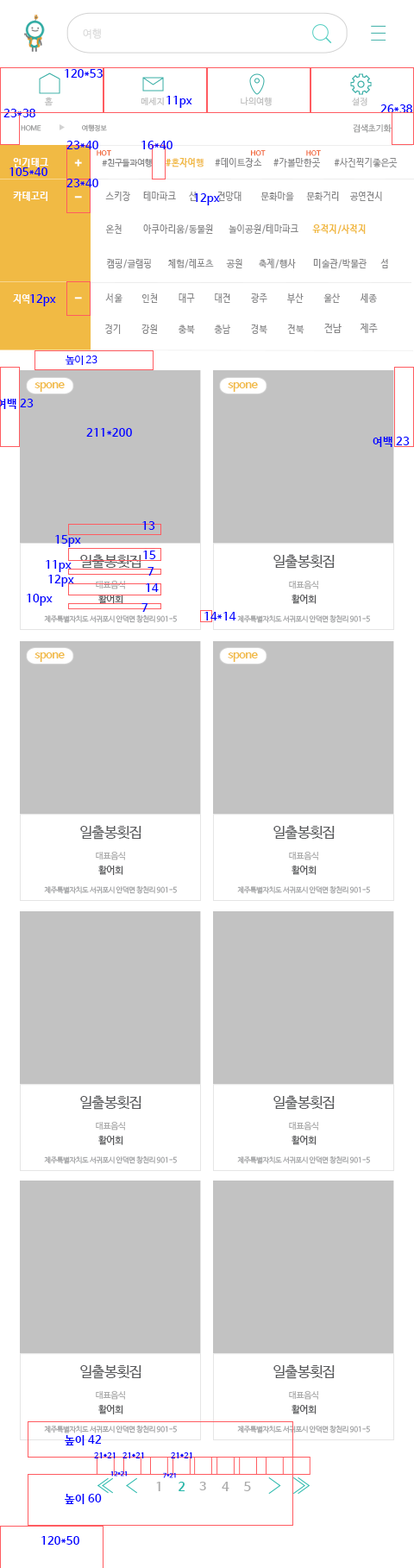
<style>
.page{position:relative;width:414px;height:1568px;background:#ffffff}
.page>*{position:absolute;margin:0}
.t1{font:10.4px "NanumBarunGothic";letter-spacing:0.025em;color:#dcdcdc}
.t2{font:11.2px "NanumBarunGothicBold";letter-spacing:0.025em;color:#0000ff}
.t3{font:8.6px "NanumBarunGothic";letter-spacing:0.025em;color:#bfbfbf}
.t4{font:6.9px "NanumBarunGothic";color:#999a9a}
.t5{font:8.6px "NanumBarunGothic";color:#999a9a}
.t6{font:9.9px "NanumBarunGothicBold";letter-spacing:0.025em;color:#ffffff}
.t7{font:6.8px "NanumBarunGothic";letter-spacing:0.025em}
.t8{font:8.4px "NanumBarunGothic";letter-spacing:0.025em;color:#868687}
.t9{font:9.1px "NanumBarunGothicBold";letter-spacing:0.025em;color:#f1ba44}
.t10{font:9.1px "NanumBarunGothic";letter-spacing:0.025em;color:#868687}
.t11{font:9.5px "NanumBarunGothicBold";letter-spacing:0.025em;color:#ffffff}
.t12{font:9.5px "NanumBarunGothic";letter-spacing:0.025em;color:#868687}
.t13{font:10.4px "NanumBarunGothic";letter-spacing:-0.025em;color:#0000ff}
.t14{font:11.6px "NanumBarunGothicBold";letter-spacing:-0.05em;color:#f1ba44}
.t15{font:14.3px "NanumBarunGothic";letter-spacing:-0.025em;color:#58595b}
.t16{font:8.7px "NanumBarunGothic";letter-spacing:-0.025em;color:#aaaaaa}
.t17{font:9.4px "NanumBarunGothic";letter-spacing:-0.025em;color:#555658}
.t18{font:7.2px "NanumBarunGothic";letter-spacing:-0.025em;color:#a3a4a6}
.t19{font:7.8px "NanumBarunGothicBold";letter-spacing:0.025em;color:#0000ff}
.t20{font:6px "NanumBarunGothicBold";letter-spacing:0.025em;color:#0000ff}
.t21{font:12.1px "NanumBarunGothicBold";letter-spacing:-0.05em;color:#ababab}
.t22{font:6px "NanumBarunGothicBold";letter-spacing:0.025em}
.t23{font:12.1px "NanumBarunGothicBold";letter-spacing:-0.05em;color:#25b7aa}
</style>
<div class="page">
<p class="t1" style="left:83px;top:28px;width:18px;height:11px">여행</p>
<p class="t2" style="left:65px;top:69px;width:38px;height:9px">120*53</p>
<p class="t3" style="left:44px;top:97px;width:10px;height:9px">홈</p>
<p class="t3" style="left:141px;top:98px;width:23px;height:7px">메세지</p>
<p class="t2" style="left:167px;top:96px;width:25px;height:12px">11px</p>
<p class="t3" style="left:241px;top:97px;width:31px;height:9px">나의여행</p>
<p class="t3" style="left:352px;top:98px;width:16px;height:8px">설정</p>
<p class="t2" style="left:3px;top:109px;width:32px;height:8px">23*38</p>
<p class="t2" style="left:381px;top:104px;width:31px;height:9px">26*38</p>
<p class="t4" style="left:21px;top:125px;width:20px;height:6px">HOME</p>
<p class="t4" style="left:82px;top:124px;width:25px;height:8px">여행정보</p>
<p class="t5" style="left:353px;top:123px;width:39px;height:10px">검색초기화</p>
<p class="t2" style="left:66px;top:141px;width:32px;height:8px">23*40</p>
<p class="t2" style="left:142px;top:141px;width:31px;height:8px">16*40</p>
<p class="t6" style="left:13px;top:158px;width:35px;height:9px">인기태그</p>
<p class="t6" style="left:13px;top:158px;width:35px;height:9px">인기태그</p>
<p class="t7" style="left:97px;top:150px;width:14px;height:6px">HOT</p>
<p class="t8" style="left:102px;top:159px;width:50px;height:8px">#친구들과여행</p>
<p class="t9" style="left:166px;top:158px;width:38px;height:9px">#혼자여행</p>
<p class="t10" style="left:215px;top:158px;width:47px;height:9px">#데이트장소</p>
<p class="t7" style="left:251px;top:150px;width:15px;height:6px">HOT</p>
<p class="t10" style="left:274px;top:158px;width:46px;height:9px">#가볼만한곳</p>
<p class="t7" style="left:306px;top:150px;width:15px;height:6px">HOT</p>
<p class="t10" style="left:334px;top:158px;width:64px;height:9px">#사진찍기좋은곳</p>
<p class="t2" style="left:9px;top:167px;width:38px;height:9px">105*40</p>
<p class="t2" style="left:66px;top:179px;width:32px;height:8px">23*40</p>
<p class="t6" style="left:13px;top:192px;width:34px;height:9px">카테고리</p>
<p class="t10" style="left:105px;top:192px;width:25px;height:9px">스키장</p>
<p class="t10" style="left:143px;top:191px;width:33px;height:10px">테마파크</p>
<p class="t10" style="left:189px;top:192px;width:9px;height:9px">산</p>
<p class="t2" style="left:194px;top:193px;width:26px;height:12px">12px</p>
<p class="t10" style="left:217px;top:192px;width:25px;height:9px">전망대</p>
<p class="t10" style="left:261px;top:192px;width:33px;height:9px">문화마을</p>
<p class="t10" style="left:306px;top:192px;width:33px;height:9px">문화거리</p>
<p class="t10" style="left:349px;top:192px;width:33px;height:9px">공연전시</p>
<p class="t10" style="left:105px;top:224px;width:17px;height:10px">온천</p>
<p class="t10" style="left:143px;top:224px;width:70px;height:10px">아쿠아리움/동물원</p>
<p class="t10" style="left:229px;top:224px;width:70px;height:10px">놀이공원/테마파크</p>
<p class="t9" style="left:312px;top:224px;width:54px;height:10px">유적지/사적지</p>
<p class="t10" style="left:106px;top:259px;width:45px;height:9px">캠핑/글램핑</p>
<p class="t10" style="left:167px;top:259px;width:47px;height:9px">체험/레포츠</p>
<p class="t10" style="left:226px;top:259px;width:16px;height:9px">공원</p>
<p class="t10" style="left:259px;top:258px;width:37px;height:10px">축제/행사</p>
<p class="t10" style="left:313px;top:259px;width:54px;height:9px">미술관/박물관</p>
<p class="t10" style="left:381px;top:259px;width:7px;height:9px">섬</p>
<p class="t10" style="left:105px;top:293px;width:18px;height:10px">서울</p>
<p class="t10" style="left:142px;top:293px;width:16px;height:10px">인천</p>
<p class="t10" style="left:179px;top:293px;width:16px;height:10px">대구</p>
<p class="t10" style="left:215px;top:293px;width:15px;height:10px">대전</p>
<p class="t10" style="left:251px;top:293px;width:17px;height:10px">광주</p>
<p class="t10" style="left:287px;top:293px;width:17px;height:11px">부산</p>
<p class="t10" style="left:324px;top:293px;width:16px;height:10px">울산</p>
<p class="t10" style="left:360px;top:293px;width:17px;height:10px">세종</p>
<p class="t11" style="left:13px;top:294px;width:16px;height:10px">지역</p>
<p class="t2" style="left:30px;top:294px;width:26px;height:12px">12px</p>
<p class="t10" style="left:105px;top:324px;width:16px;height:10px">경기</p>
<p class="t10" style="left:142px;top:324px;width:15px;height:10px">강원</p>
<p class="t10" style="left:178px;top:324px;width:17px;height:10px">충북</p>
<p class="t10" style="left:214px;top:324px;width:16px;height:10px">충남</p>
<p class="t10" style="left:251px;top:324px;width:17px;height:10px">경북</p>
<p class="t10" style="left:287px;top:324px;width:18px;height:10px">전북</p>
<p class="t12" style="left:324px;top:324px;width:18px;height:9px">전남</p>
<p class="t12" style="left:360px;top:323px;width:18px;height:10px">제주</p>
<p class="t13" style="left:65px;top:355px;width:33px;height:10px">높이 23</p>
<p class="t14" style="left:35px;top:382px;width:30px;height:10px">spone</p>
<p class="t14" style="left:228px;top:382px;width:30px;height:10px">spone</p>
<p class="t2" style="left:86px;top:428px;width:46px;height:9px">211*200</p>
<p class="t2" style="left:373px;top:437px;width:37px;height:10px">여백 23</p>
<p class="t2" style="left:142px;top:521px;width:13px;height:9px">13</p>
<p class="t2" style="left:55px;top:535px;width:26px;height:12px">15px</p>
<p class="t15" style="left:80px;top:554px;width:62px;height:15px">일출봉횟집</p>
<p class="t2" style="left:143px;top:551px;width:13px;height:8px">15</p>
<p class="t15" style="left:274px;top:554px;width:61px;height:15px">일출봉횟집</p>
<p class="t2" style="left:46px;top:560px;width:26px;height:12px">11px</p>
<p class="t2" style="left:148px;top:567px;width:6px;height:9px">7</p>
<p class="t2" style="left:48px;top:575px;width:26px;height:12px">12px</p>
<p class="t16" style="left:96px;top:580px;width:29px;height:9px">대표음식</p>
<p class="t16" style="left:289px;top:580px;width:29px;height:9px">대표음식</p>
<p class="t2" style="left:27px;top:594px;width:26px;height:12px">10px</p>
<p class="t2" style="left:146px;top:583px;width:13px;height:9px">14</p>
<p class="t17" style="left:98px;top:595px;width:25px;height:9px">활어회</p>
<p class="t2" style="left:142px;top:603px;width:6px;height:9px">7</p>
<p class="t17" style="left:292px;top:595px;width:25px;height:9px">활어회</p>
<p class="t18" style="left:44px;top:615px;width:133px;height:8px">제주특별자치도 서귀포시 안덕면 창천리 901-5</p>
<p class="t2" style="left:205px;top:612px;width:31px;height:8px">14*14</p>
<p class="t18" style="left:237px;top:615px;width:133px;height:8px">제주특별자치도 서귀포시 안덕면 창천리 901-5</p>
<p class="t14" style="left:35px;top:652px;width:30px;height:10px">spone</p>
<p class="t14" style="left:228px;top:652px;width:30px;height:10px">spone</p>
<p class="t15" style="left:80px;top:825px;width:62px;height:15px">일출봉횟집</p>
<p class="t15" style="left:274px;top:825px;width:61px;height:15px">일출봉횟집</p>
<p class="t16" style="left:96px;top:851px;width:29px;height:9px">대표음식</p>
<p class="t16" style="left:289px;top:851px;width:29px;height:9px">대표음식</p>
<p class="t17" style="left:98px;top:866px;width:25px;height:9px">활어회</p>
<p class="t17" style="left:292px;top:866px;width:25px;height:9px">활어회</p>
<p class="t18" style="left:44px;top:886px;width:133px;height:8px">제주특별자치도 서귀포시 안덕면 창천리 901-5</p>
<p class="t18" style="left:237px;top:886px;width:133px;height:8px">제주특별자치도 서귀포시 안덕면 창천리 901-5</p>
<p class="t15" style="left:80px;top:1095px;width:62px;height:15px">일출봉횟집</p>
<p class="t15" style="left:274px;top:1095px;width:61px;height:15px">일출봉횟집</p>
<p class="t16" style="left:96px;top:1121px;width:29px;height:9px">대표음식</p>
<p class="t16" style="left:289px;top:1121px;width:29px;height:9px">대표음식</p>
<p class="t17" style="left:98px;top:1136px;width:25px;height:9px">활어회</p>
<p class="t17" style="left:292px;top:1136px;width:25px;height:9px">활어회</p>
<p class="t18" style="left:44px;top:1156px;width:133px;height:8px">제주특별자치도 서귀포시 안덕면 창천리 901-5</p>
<p class="t18" style="left:237px;top:1156px;width:133px;height:8px">제주특별자치도 서귀포시 안덕면 창천리 901-5</p>
<p class="t15" style="left:80px;top:1364px;width:62px;height:15px">일출봉횟집</p>
<p class="t15" style="left:274px;top:1364px;width:61px;height:15px">일출봉횟집</p>
<p class="t16" style="left:96px;top:1390px;width:29px;height:10px">대표음식</p>
<p class="t16" style="left:289px;top:1390px;width:29px;height:10px">대표음식</p>
<p class="t17" style="left:98px;top:1405px;width:25px;height:9px">활어회</p>
<p class="t17" style="left:292px;top:1405px;width:25px;height:9px">활어회</p>
<p class="t18" style="left:44px;top:1426px;width:133px;height:7px">제주특별자치도 서귀포시 안덕면 창천리 901-5</p>
<p class="t18" style="left:237px;top:1426px;width:133px;height:7px">제주특별자치도 서귀포시 안덕면 창천리 901-5</p>
<p class="t2" style="left:65px;top:1435px;width:37px;height:10px">높이 42</p>
<p class="t19" style="left:94px;top:1452px;width:22px;height:6px">21*21</p>
<p class="t19" style="left:123px;top:1452px;width:21px;height:6px">21*21</p>
<p class="t19" style="left:171px;top:1452px;width:21px;height:6px">21*21</p>
<p class="t20" style="left:110px;top:1470px;width:17px;height:7px">12*21</p>
<p class="t21" style="left:156px;top:1482px;width:5px;height:9px">1</p>
<p class="t22" style="left:163px;top:1472px;width:13px;height:6px">7*21</p>
<p class="t23" style="left:179px;top:1482px;width:7px;height:9px">2</p>
<p class="t21" style="left:199px;top:1482px;width:7px;height:8px">3</p>
<p class="t21" style="left:222px;top:1482px;width:8px;height:9px">4</p>
<p class="t21" style="left:244px;top:1482px;width:7px;height:9px">5</p>
<p class="t2" style="left:65px;top:1494px;width:37px;height:10px">높이 60</p>
<p class="t2" style="left:41px;top:1536px;width:38px;height:9px">120*50</p>
</div>
